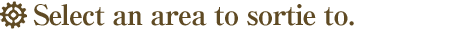
<style>
.page{position:relative;width:457px;height:30px;background:#ffffff}
.page>*{position:absolute;margin:0}
.t1{font:28px "RyuminPro-ExBold";letter-spacing:-0.04em;color:#5f4a23}
</style>
<div class="page">
<p class="t1" style="left:33px;top:4px;width:321px;height:22px">Select an area to sortie to.</p>
</div>
